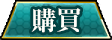
<style>
.page{position:relative;width:112px;height:40px}
.page>*{position:absolute;margin:0}
.t1{font:26px "RyuminPr6N-ExBold";color:#fffffa}
</style>
<div class="page">
<p class="t1" style="left:31px;top:8px;width:50px;height:25px">購買</p>
</div>
